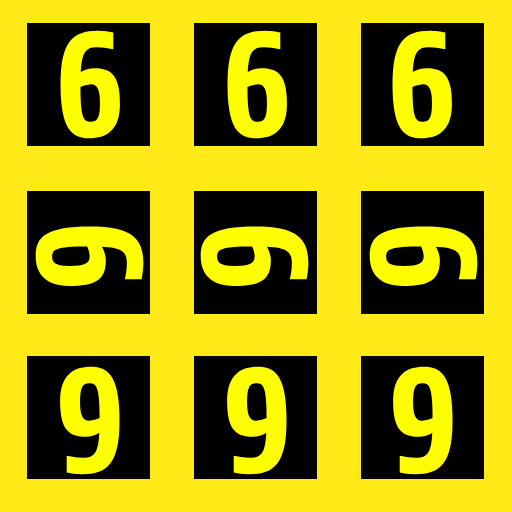
<style>
.page{position:relative;width:512px;height:512px;background:#ffea17}
.page>*{position:absolute;margin:0}
.t1{font:150px "Share-BoldOSF";color:#ffff00}
</style>
<div class="page">
<p class="t1" style="left:60px;top:30px;width:60px;height:109px">6</p>
<p class="t1" style="left:227px;top:30px;width:60px;height:109px">6</p>
<p class="t1" style="left:392px;top:30px;width:60px;height:109px">6</p>
<p class="t1" style="left:35px;top:226px;width:109px;height:60px;rotate:90deg">6</p>
<p class="t1" style="left:200px;top:226px;width:109px;height:60px;rotate:90deg">6</p>
<p class="t1" style="left:369px;top:226px;width:109px;height:60px;rotate:90deg">6</p>
<p class="t1" style="left:60px;top:366px;width:60px;height:109px;rotate:-180deg">6</p>
<p class="t1" style="left:227px;top:366px;width:60px;height:109px;rotate:-180deg">6</p>
<p class="t1" style="left:393px;top:366px;width:60px;height:109px;rotate:-180deg">6</p>
</div>
